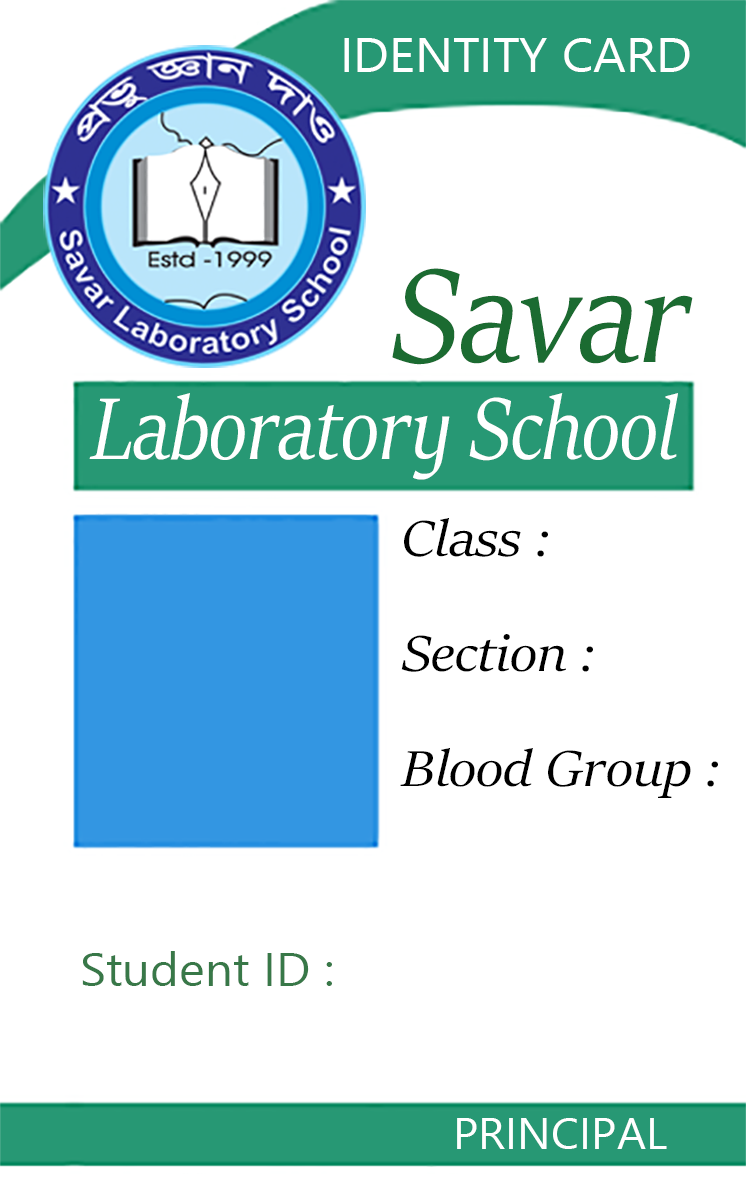
<style>
.page{position:relative;width:746px;height:1180px;background:#ffffff}
.page>*{position:absolute;margin:0}
.t1{font:47.6px "NirmalaUI";color:#ffffff;scale:1.07 1}
.t2{font:149.3px "SitkaBanner-Italic";color:#1b6b31;scale:0.91 1}
.t3{font:98.3px "SitkaBanner-Italic";color:#ffffff;scale:0.86 1}
.t4{font:56.9px "SitkaBanner-Italic";color:#000000;scale:1.06 1}
.t5{font:46.3px "NirmalaUI";color:#387848;scale:1.06 1}
.t6{font:42.6px "NirmalaUI";color:#ffffff;scale:1.06 1}
</style>
<div class="page">
<p class="t1" style="left:344px;top:38px;width:346px;height:34px">IDENTITY CARD</p>
<p class="t2" style="left:392px;top:268px;width:301px;height:97px">Savar</p>
<p class="t3" style="left:89px;top:393px;width:589px;height:87px">Laboratory School</p>
<p class="t4" style="left:404px;top:518px;width:144px;height:39px">Class :</p>
<p class="t4" style="left:401px;top:634px;width:192px;height:38px">Section :</p>
<p class="t4" style="left:400px;top:748px;width:318px;height:50px">Blood Group :</p>
<p class="t5" style="left:82px;top:951px;width:250px;height:35px">Student ID :</p>
<p class="t6" style="left:457px;top:1118px;width:210px;height:31px">PRINCIPAL</p>
</div>
